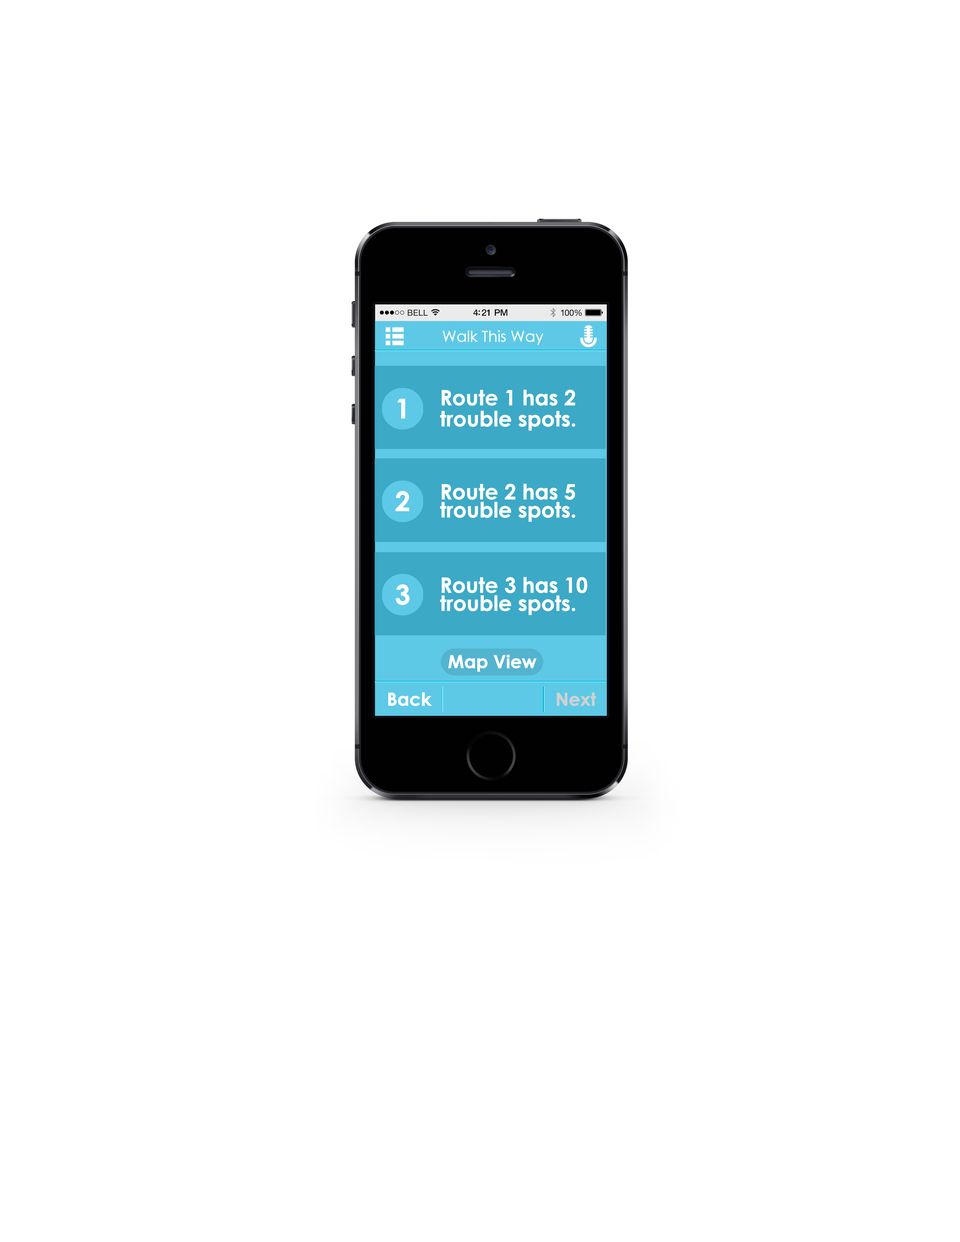
<style>
.page{position:relative;width:960px;height:1242px;background:#ffffff}
.page>*{position:absolute;margin:0}
.t1{font:15.1px "CenturyGothic";letter-spacing:-0.025em;color:#ffffff;font-weight:bold}
.t2{font:21.1px/21.1px "CenturyGothic-Bold";letter-spacing:-0.025em;color:#ffffff;font-weight:bold}
.t3{font:27.1px "CenturyGothic-Bold";letter-spacing:-0.025em;color:#ffffff;font-weight:bold}
.t4{font:21.1px/18.1px "CenturyGothic-Bold";letter-spacing:-0.025em;color:#ffffff;font-weight:bold}
.t5{font:18.1px "CenturyGothic-Bold";letter-spacing:-0.025em;color:#ffffff;font-weight:bold}
.t6{font:18.1px "CenturyGothic-Bold";letter-spacing:-0.025em;color:#d1d1d1;font-weight:bold}
</style>
<div class="page">
<p class="t1" style="left:442px;top:330px;width:102px;height:15px">Walk This Way</p>
<p class="t2" style="left:440px;top:390px;width:135px;height:41px">Route 1 has 2 trouble spots.</p>
<p class="t3" style="left:397px;top:399px;width:8px;height:20px">1</p>
<p class="t4" style="left:440px;top:484px;width:135px;height:38px">Route 2 has 5 trouble spots.</p>
<p class="t3" style="left:395px;top:491px;width:14px;height:21px">2</p>
<p class="t4" style="left:440px;top:577px;width:147px;height:38px">Route 3 has 10 trouble spots.</p>
<p class="t3" style="left:396px;top:584px;width:14px;height:21px">3</p>
<p class="t5" style="left:448px;top:655px;width:88px;height:17px">Map View</p>
<p class="t5" style="left:388px;top:692px;width:44px;height:14px">Back</p>
<p class="t6" style="left:557px;top:693px;width:39px;height:13px">Next</p>
</div>
